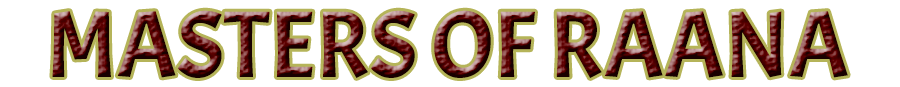
<style>
.page{position:relative;width:900px;height:87px;background:#ffffff}
.page>*{position:absolute;margin:0}
.t1{font:94.2px "Acme-Regular"}
</style>
<div class="page">
<p class="t1" style="left:52px;top:10px;width:796px;height:68px">MASTERS OF RAANA</p>
</div>
